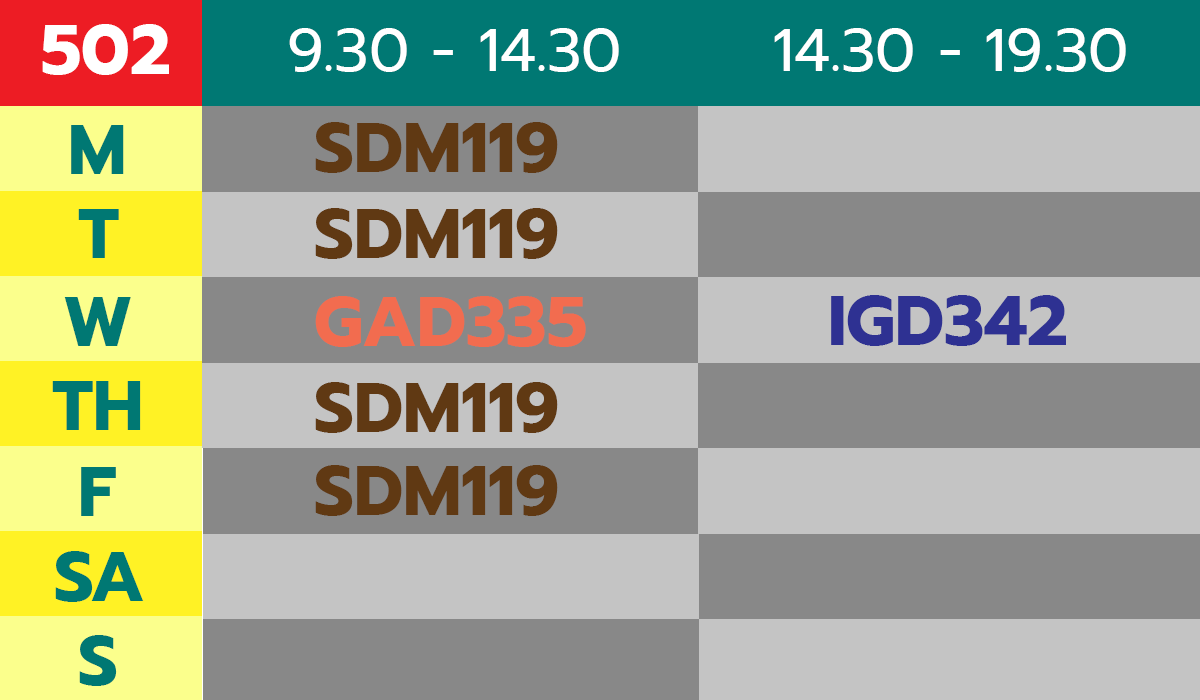
<style>
.page{position:relative;width:1200px;height:700px;background:#c4c4c4}
.page>*{position:absolute;margin:0}
.t1{font:70px "Prompt-Bold";color:#ffffff}
.t2{font:60px "Prompt-Regular";color:#ffffff}
.t3{font:70px "Prompt-Bold";color:#007873}
.t4{font:70px "Prompt-Bold";color:#603913}
.t5{font:70px "Prompt-Bold";color:#f26c4f}
.t6{font:70px "Prompt-Bold";color:#2e3192}
</style>
<div class="page">
<p class="t1" style="left:42px;top:24px;width:127px;height:51px">502</p>
<p class="t2" style="left:289px;top:28px;width:330px;height:44px">9.30 - 14.30</p>
<p class="t2" style="left:774px;top:28px;width:352px;height:44px">14.30 - 19.30</p>
<p class="t3" style="left:71px;top:125px;width:53px;height:49px">M</p>
<p class="t4" style="left:315px;top:122px;width:243px;height:51px">SDM119</p>
<p class="t3" style="left:78px;top:209px;width:41px;height:49px">T</p>
<p class="t4" style="left:315px;top:208px;width:243px;height:51px">SDM119</p>
<p class="t3" style="left:64px;top:297px;width:67px;height:49px">W</p>
<p class="t5" style="left:315px;top:296px;width:271px;height:51px">GAD335</p>
<p class="t6" style="left:831px;top:295px;width:235px;height:51px">IGD342</p>
<p class="t3" style="left:52px;top:381px;width:89px;height:49px">TH</p>
<p class="t4" style="left:315px;top:382px;width:243px;height:51px">SDM119</p>
<p class="t3" style="left:81px;top:467px;width:35px;height:49px">F</p>
<p class="t4" style="left:315px;top:465px;width:243px;height:51px">SDM119</p>
<p class="t3" style="left:55px;top:551px;width:89px;height:51px">SA</p>
<p class="t3" style="left:79px;top:635px;width:38px;height:51px">S</p>
</div>
